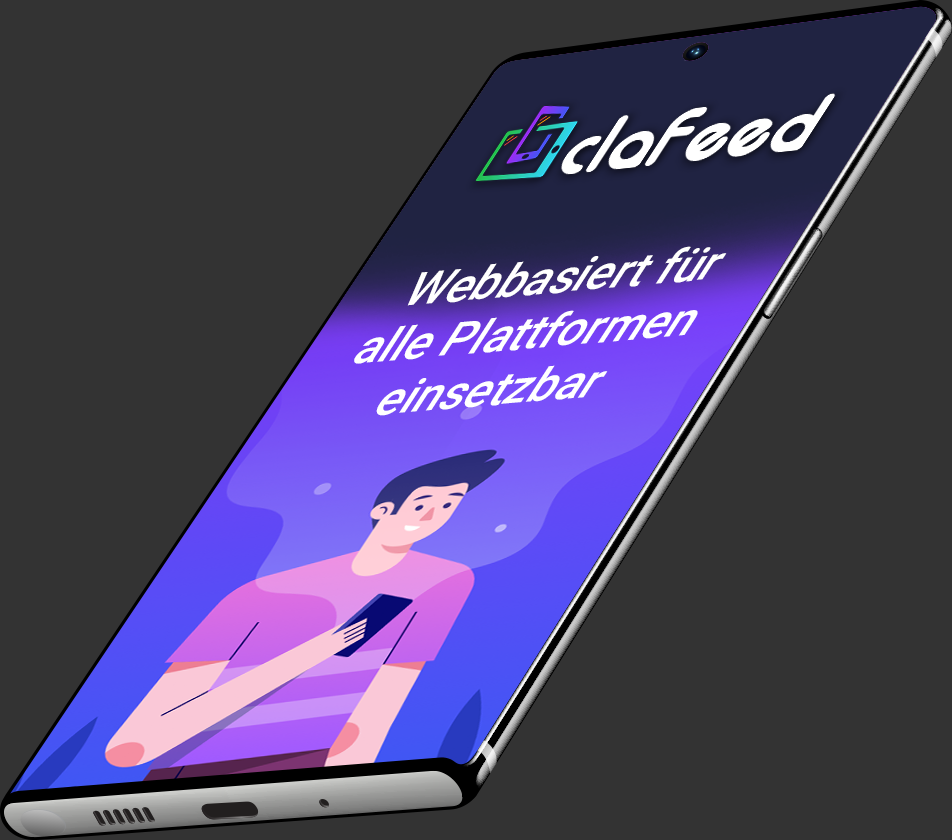
<style>
.page{position:relative;width:952px;height:840px;background:#333333}
.page>*{position:absolute;margin:0}
.t1{font:56.3px "Roboto-Medium";color:#ffffff;scale:0.84 1}
</style>
<div class="page">
<p class="t1" style="left:354px;top:246px;width:373px;height:170px;text-align:center;rotate:-5deg">Webbasiert für<br>alle Plattformen<br>einsetzbar</p>
</div>
